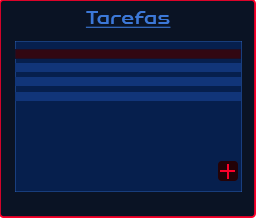
<style>
.page{position:relative;width:256px;height:219px;background:#061f4d}
.page>*{position:absolute;margin:0}
.t1{font:18.2px "Speedy-Regular";color:#3c78d8;text-decoration:underline}
</style>
<div class="page">
<p class="t1" style="left:85px;top:11px;width:86px;height:17px">Tarefas</p>
</div>
